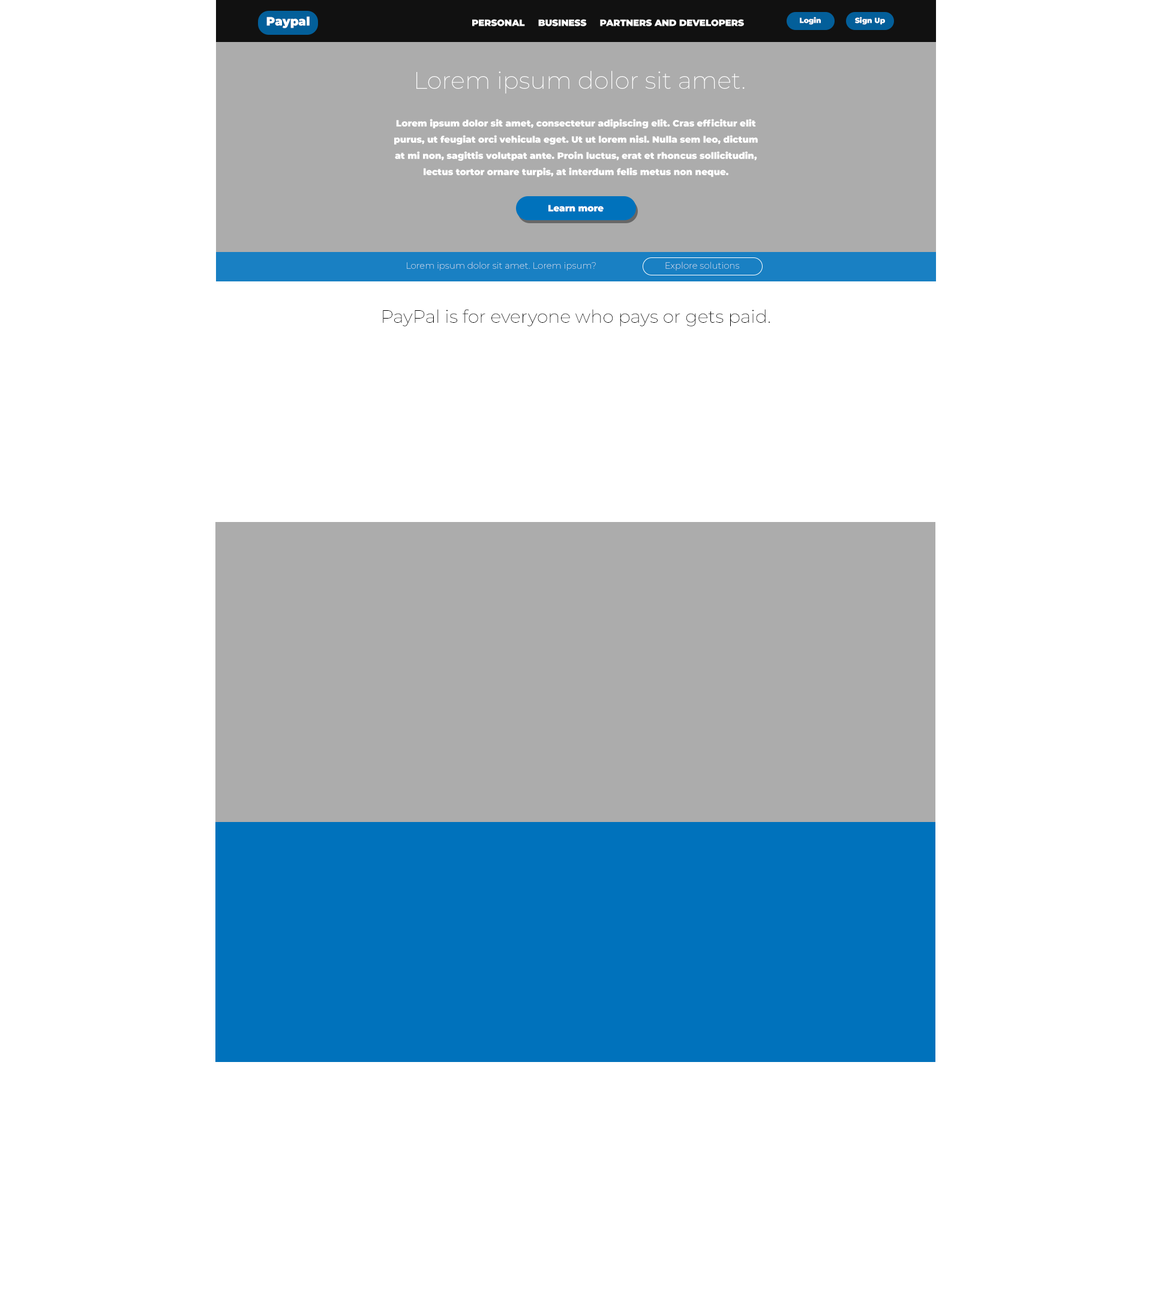
<style>
.page{position:relative;width:1152px;height:1296px;background:#ffffff}
.page>*{position:absolute;margin:0}
.t1{font:12px "Montserrat-Black";color:#ffffff}
.t2{font:7.2px "Montserrat-Black";color:#ffffff}
.t3{font:9px "Montserrat-Black";color:#ffffff}
.t4{font:24px "Montserrat-ExtraLight";color:#ffffff}
.t5{font:9px/16.2px "Montserrat-Black";color:#ffffff}
.t6{font:9px "Montserrat-ExtraLight"}
.t7{font:18px "Montserrat-ExtraLight";color:#000000}
</style>
<div class="page">
<p class="t1" style="left:266px;top:16px;width:44px;height:12px">Paypal</p>
<p class="t2" style="left:800px;top:17px;width:21px;height:8px">Login</p>
<p class="t2" style="left:855px;top:17px;width:30px;height:8px">Sign Up</p>
<p class="t3" style="left:472px;top:19px;width:272px;height:7px">PERSONAL     BUSINESS     PARTNERS AND DEVELOPERS</p>
<p class="t4" style="left:416px;top:71px;width:329px;height:23px">Lorem ipsum dolor sit amet.</p>
<p class="t5" style="left:394px;top:119px;width:364px;height:58px;text-align:center">Lorem ipsum dolor sit amet, consectetur adipiscing elit. Cras efficitur elit purus, ut feugiat orci vehicula eget. Ut ut lorem nisl. Nulla sem leo, dictum at mi non, sagittis volutpat ante. Proin luctus, erat et rhoncus sollicitudin, lectus tortor ornare turpis, at interdum felis metus non neque.</p>
<p class="t3" style="left:548px;top:205px;width:56px;height:7px">Learn more</p>
<p class="t6" style="left:407px;top:262px;width:189px;height:9px">Lorem ipsum dolor sit amet. Lorem ipsum?</p>
<p class="t6" style="left:665px;top:262px;width:74px;height:9px">Explore solutions</p>
<p class="t7" style="left:383px;top:309px;width:387px;height:17px">PayPal is for everyone who pays or gets paid.</p>
</div>
